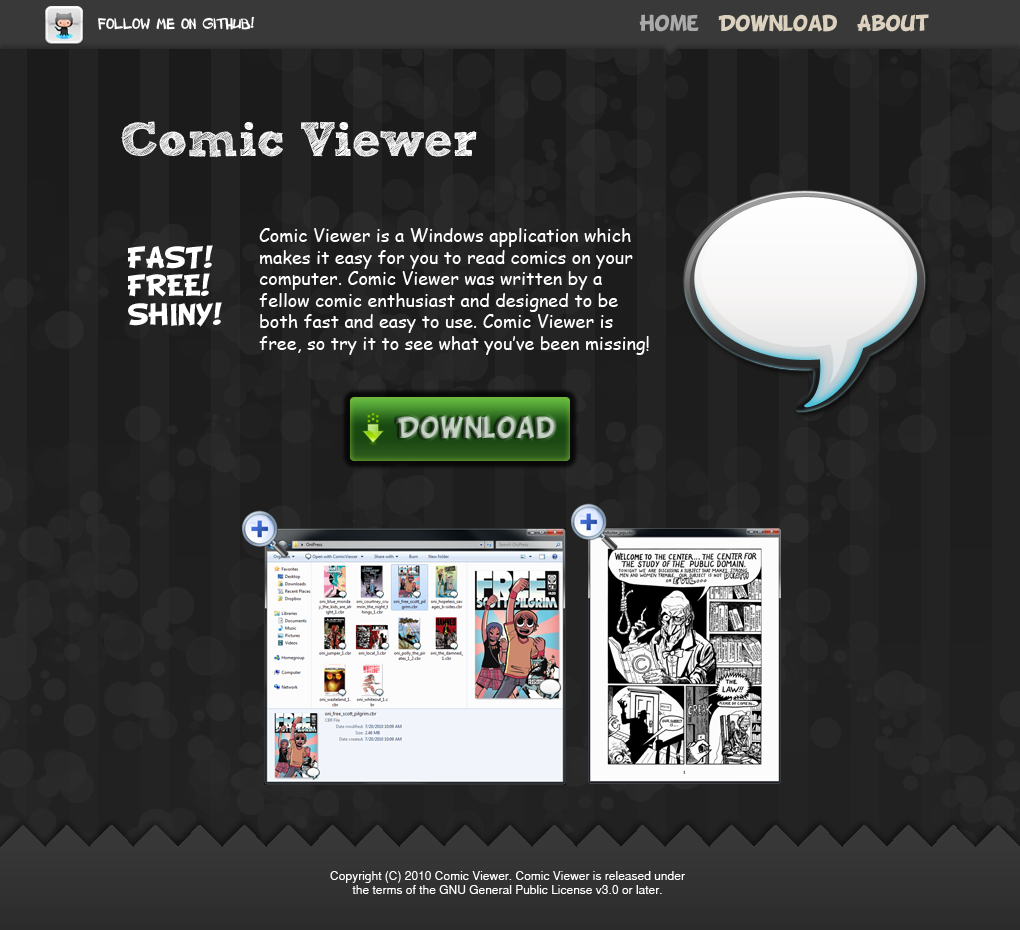
<style>
.page{position:relative;width:1020px;height:930px}
.page>*{position:absolute;margin:0}
.t1{font:14px "OpenComicFont";color:#ffffff}
.t2{font:18px "BDCartoonShout";color:#dbd1be}
.t3{font:18px "BDCartoonShout";color:#abaaaa}
.t4{font:18px "ComicSansMS";color:#ffffff}
.t5{font:24px "BDCartoonShout";color:#ffffff}
.t6{font:24px "BDCartoonShout"}
.t7{font:12px "SansSerif";color:#ffffff}
</style>
<div class="page">
<p class="t1" style="left:98px;top:16px;width:157px;height:14px">Follow me on GitHub!</p>
<p class="t2" style="left:639px;top:14px;width:290px;height:18px"><span class="t3">Home</span>  Download  About</p>
<p class="t4" style="left:259px;top:228px;width:390px;height:127px">Comic Viewer is a Windows application which makes it easy for you to read comics on your computer. Comic Viewer was written by a fellow comic enthusiast and designed to be both fast and easy to use. Comic Viewer is free, so try it to see what you’ve been missing!</p>
<p class="t5" style="left:128px;top:245px;width:94px;height:82px">FAST!<br>FREE!<br>SHINY!</p>
<p class="t6" style="left:396px;top:416px;width:158px;height:23px">Download</p>
<p class="t7" style="left:330px;top:871px;width:355px;height:23px;text-align:center">Copyright (C) 2010 Comic Viewer. Comic Viewer is released under the terms of the GNU General Public License v3.0 or later.</p>
</div>
